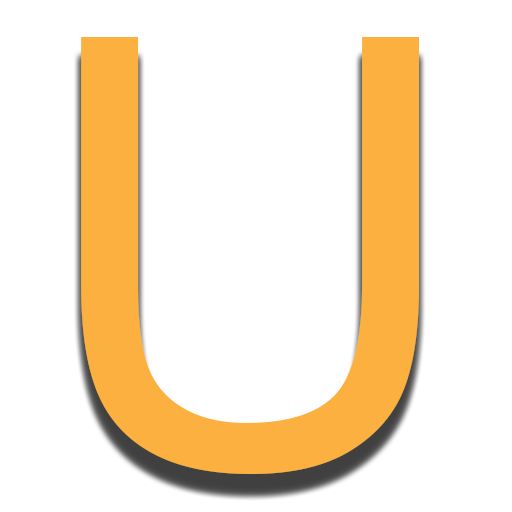
<style>
.page{position:relative;width:512px;height:512px;background:#ffffff}
.page>*{position:absolute;margin:0}
.t1{font:600px "ArialMT";color:#fbb040}
</style>
<div class="page">
<p class="t1" style="left:81px;top:37px;width:338px;height:437px">U</p>
</div>
